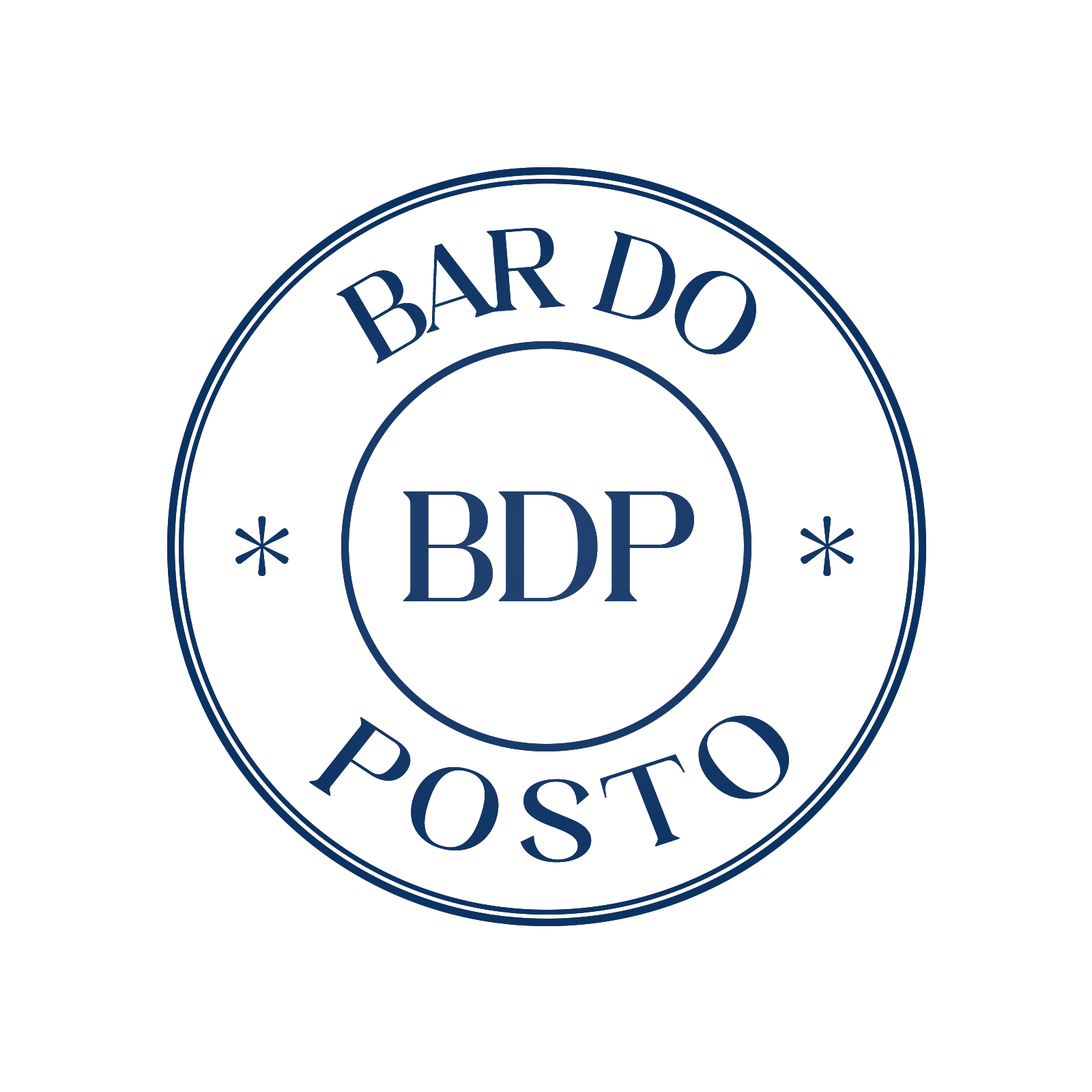
<style>
.page{position:relative;width:1092px;height:1092px;background:#ffffff}
.page>*{position:absolute;margin:0}
.t1{font:109.2px "Rintik-Regular";letter-spacing:-0.1em;color:#113767;text-transform:uppercase}
.t2{font:109.2px "Rintik-Regular";letter-spacing:-0.1em;color:#113767}
.t3{font:149px "Rintik-Regular";letter-spacing:-0.04em;color:#1f406f}
.t4{font:235.7px "Rintik-Regular";letter-spacing:-0.1em;color:#113767;text-transform:uppercase}
.t5{font:109.2px "Rintik-Regular";letter-spacing:0.24em;color:#113767;text-transform:uppercase;scale:1.1 1}
</style>
<div class="page">
<p class="t1" style="left:336px;top:228px;width:420px;height:136px;rotate:35deg"><span class="t2">B</span>AR  DO</p>
<p class="t3" style="left:403px;top:491px;width:291px;height:110px">BDP</p>
<p class="t4" style="left:235px;top:516px;width:54px;height:60px">*</p>
<p class="t4" style="left:801px;top:516px;width:53px;height:60px">*</p>
<p class="t5" style="left:309px;top:715px;width:480px;height:148px">posto</p>
</div>
